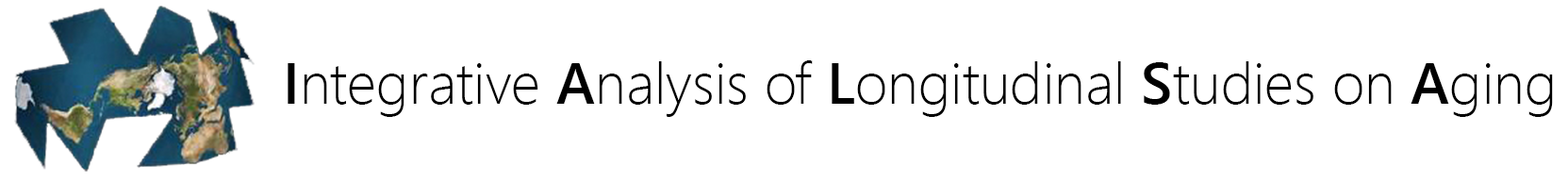
<style>
.page{position:relative;width:1568px;height:182px;background:#ffffff}
.page>*{position:absolute;margin:0}
.t1{font:57.6px "SegoeUI-Light";color:#000000}
.t2{font:57.6px "SegoeUI-Semibold";color:#000000}
</style>
<div class="page">
<p class="t1" style="left:288px;top:60px;width:1265px;height:57px"><span class="t2">I</span>ntegrative <span class="t2">A</span>nalysis of <span class="t2">L</span>ongitudinal <span class="t2">S</span>tudies on <span class="t2">A</span>ging</p>
</div>
